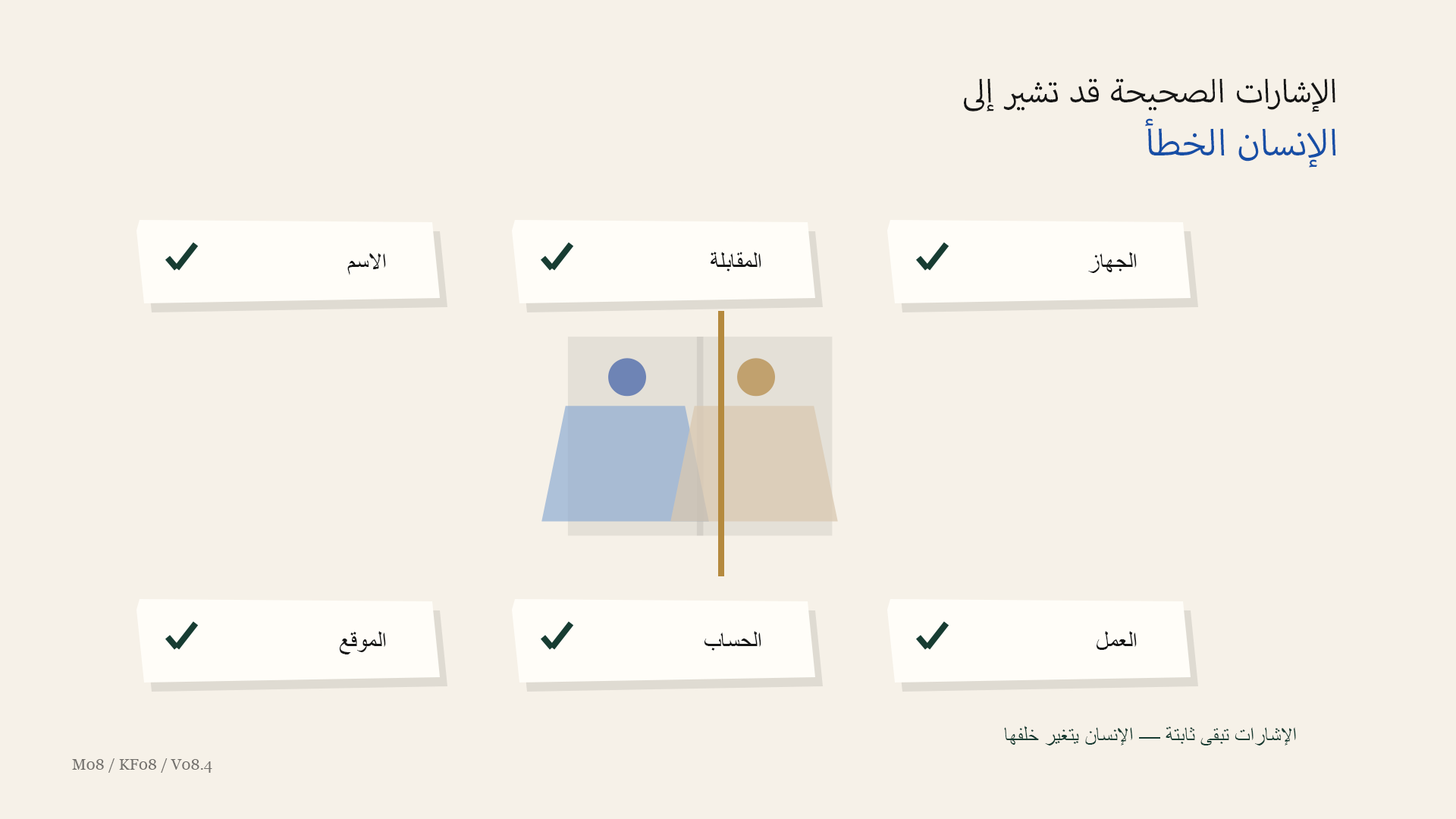
<style>
.page{position:relative;width:1456px;height:819px;background:#f6f1e8}
.page>*{position:absolute;margin:0}
.t1{font:45.5px "MyriadArabic-Regular";color:#151515}
.t2{font:51.6px "MyriadArabic-Regular";color:#174fa6}
.t3{font:24.3px "ArialMT";color:#151515}
.t4{font:87.6px "ArialMT";color:#6e84b5}
.t5{font:87.6px "ArialMT";color:#c1a16e}
.t6{font:21.2px "ArialMT";color:#173c32}
.t7{font:15.2px "Georgia";color:#716f6b}
</style>
<div class="page">
<p class="t1" style="left:964px;top:78px;width:371px;height:34px">الإشارات الصحيحة قد تشير إلى</p>
<p class="t2" style="left:1145px;top:118px;width:191px;height:50px">الإنسان الخطأ</p>
<p class="t3" style="left:347px;top:253px;width:39px;height:22px">الاسم</p>
<p class="t3" style="left:710px;top:252px;width:51px;height:19px">المقابلة</p>
<p class="t3" style="left:1088px;top:252px;width:49px;height:21px">الجهاز</p>
<p class="t4" style="left:608px;top:358px;width:38px;height:39px">●</p>
<p class="t5" style="left:737px;top:358px;width:38px;height:39px">●</p>
<p class="t3" style="left:339px;top:631px;width:47px;height:23px">الموقع</p>
<p class="t3" style="left:704px;top:631px;width:57px;height:20px">الحساب</p>
<p class="t3" style="left:1097px;top:631px;width:40px;height:19px">العمل</p>
<p class="t6" style="left:1004px;top:726px;width:292px;height:19px">الإشارات تبقى ثابتة — الإنسان يتغير خلفها</p>
<p class="t7" style="left:72px;top:758px;width:140px;height:15px">M08 / KF08 / V08.4</p>
</div>
